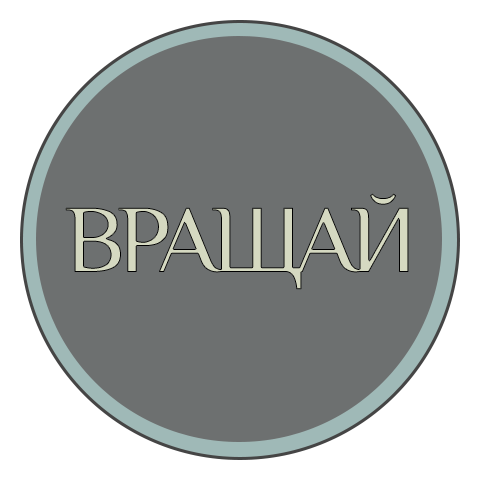
<style>
.page{position:relative;width:478px;height:478px;background:#6d7070}
.page>*{position:absolute;margin:0}
.t1{font:96px "Philosopher-Regular";letter-spacing:-0.1em;color:#d5d9c1;font-weight:bold}
</style>
<div class="page">
<p class="t1" style="left:65px;top:193px;width:344px;height:97px">ВРАЩАЙ</p>
</div>
